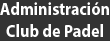
<style>
.page{position:relative;width:110px;height:41px;background:#333333}
.page>*{position:absolute;margin:0}
.t1{font:17.9px "MyriadPro-Bold";color:#ffffff;scale:0.9 1}
</style>
<div class="page">
<p class="t1" style="left:0px;top:2px;width:109px;height:35px;text-align:center">Administración<br>Club de Padel</p>
</div>
